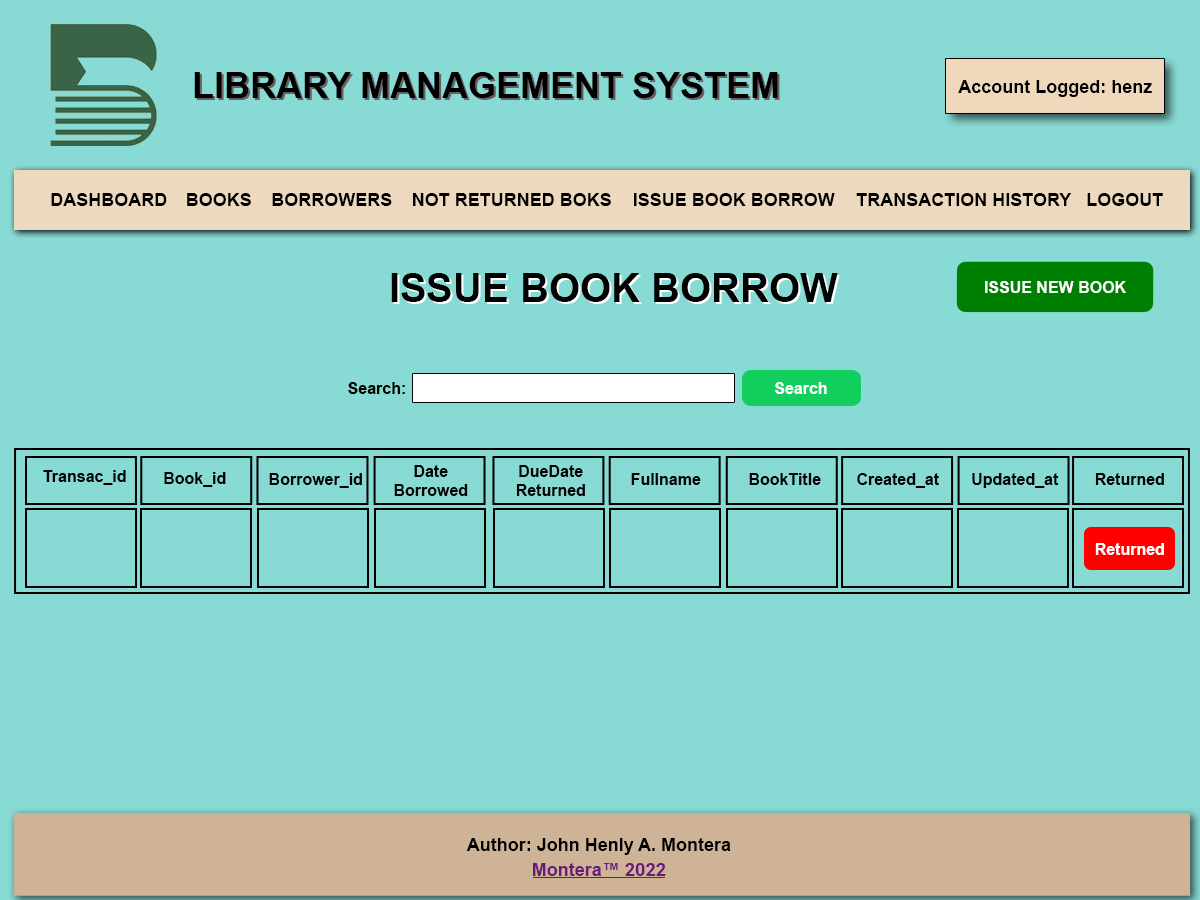
<style>
.page{position:relative;width:1200px;height:900px;background:#88dad4}
.page>*{position:absolute;margin:0}
.t1{font:36px "Arial-BoldMT";color:#000000}
.t2{font:18px "Arial-BoldMT";color:#000000}
.t3{font:40px "Arial-BoldMT";color:#000000}
.t4{font:16px "Arial-BoldMT";color:#ffffff}
.t5{font:16px "Arial-BoldMT";color:#000000}
.t6{font:18px "Arial-BoldMT";color:#681a79}
.t7{font:18px "Roboto-Bold";color:#681a79}
</style>
<div class="page">
<p class="t1" style="left:194px;top:72px;width:584px;height:26px">LIBRARY MANAGEMENT SYSTEM</p>
<p class="t2" style="left:958px;top:80px;width:194px;height:17px">Account Logged: henz</p>
<p class="t2" style="left:51px;top:193px;width:116px;height:13px">DASHBOARD</p>
<p class="t2" style="left:187px;top:193px;width:64px;height:13px">BOOKS</p>
<p class="t2" style="left:272px;top:193px;width:120px;height:13px">BORROWERS</p>
<p class="t2" style="left:413px;top:193px;width:198px;height:13px">NOT RETURNED BOKS</p>
<p class="t2" style="left:634px;top:193px;width:201px;height:13px">ISSUE BOOK BORROW</p>
<p class="t2" style="left:856px;top:193px;width:216px;height:13px">TRANSACTION HISTORY</p>
<p class="t2" style="left:1087px;top:193px;width:76px;height:13px">LOGOUT</p>
<p class="t3" style="left:391px;top:273px;width:447px;height:29px">ISSUE BOOK BORROW</p>
<p class="t4" style="left:985px;top:281px;width:141px;height:12px">ISSUE NEW BOOK</p>
<p class="t5" style="left:348px;top:382px;width:57px;height:12px">Search:</p>
<p class="t4" style="left:775px;top:382px;width:52px;height:12px">Search</p>
<p class="t5" style="left:43px;top:470px;width:83px;height:15px">Transac_id</p>
<p class="t5" style="left:164px;top:472px;width:62px;height:15px">Book_id</p>
<p class="t5" style="left:269px;top:473px;width:93px;height:15px">Borrower_id</p>
<p class="t5" style="left:394px;top:465px;width:74px;height:31px;text-align:center">Date<br>Borrowed</p>
<p class="t5" style="left:516px;top:465px;width:69px;height:31px;text-align:center">DueDate<br>Returned</p>
<p class="t5" style="left:631px;top:473px;width:70px;height:12px">Fullname</p>
<p class="t5" style="left:749px;top:473px;width:72px;height:12px">BookTitle</p>
<p class="t5" style="left:857px;top:473px;width:82px;height:15px">Created_at</p>
<p class="t5" style="left:972px;top:473px;width:87px;height:15px">Updated_at</p>
<p class="t5" style="left:1095px;top:473px;width:69px;height:12px">Returned</p>
<p class="t4" style="left:1095px;top:543px;width:69px;height:12px">Returned</p>
<p class="t2" style="left:466px;top:838px;width:265px;height:17px">Author: John Henly A. Montera</p>
<p class="t6" style="left:533px;top:863px;width:133px;height:13px">Montera™ <span class="t7">2022</span></p>
</div>
